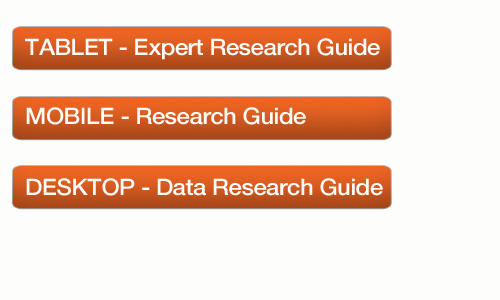
<style>
.page{position:relative;width:500px;height:300px;background:#fdfdfb}
.page>*{position:absolute;margin:0}
.t1{font:22.8px "HelveticaNeue-Medium";letter-spacing:-0.02em;color:#fdfdfb;scale:1.05 1}
</style>
<div class="page">
<p class="t1" style="left:25px;top:38px;width:355px;height:22px">TABLET - Expert Research Guide</p>
<p class="t1" style="left:26px;top:107px;width:280px;height:18px">MOBILE - Research Guide</p>
<p class="t1" style="left:26px;top:178px;width:357px;height:18px">DESKTOP - Data Research Guide</p>
</div>
